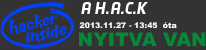
<style>
.page{position:relative;width:206px;height:50px;background:#333333}
.page>*{position:absolute;margin:0}
.t1{font:15px "NeoTech-BoldItalic";color:#ffffff}
.t2{font:7.8px "Arial-Black";color:#ffffff}
.t3{font:18.7px "Arial-Black";color:#058937}
</style>
<div class="page">
<p class="t1" style="left:81px;top:2px;width:67px;height:12px">A H.A.C.K</p>
<p class="t2" style="left:79px;top:22px;width:98px;height:7px">2013.11.27 - 13:45  óta</p>
<p class="t3" style="left:79px;top:32px;width:127px;height:14px">NYITVA VAN</p>
</div>
